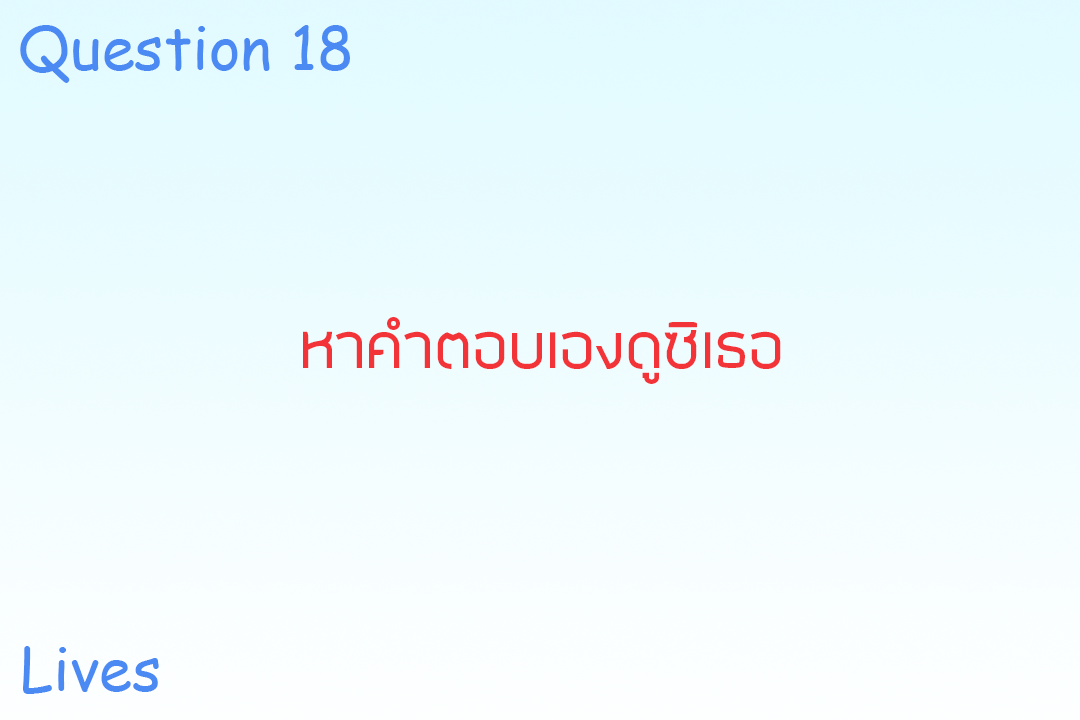
<style>
.page{position:relative;width:1080px;height:720px}
.page>*{position:absolute;margin:0}
.t1{font:60px "ComicSansMS";color:#4b8af2}
.t2{font:72px "SuperspaceRegular";color:#f23439}
.t3{font:59.6px "ComicSansMS";color:#4b8af2}
</style>
<div class="page">
<p class="t1" style="left:20px;top:25px;width:330px;height:58px">Question 18</p>
<p class="t2" style="left:303px;top:317px;width:478px;height:67px">หาคำตอบเองดูซิเธอ</p>
<p class="t3" style="left:23px;top:646px;width:136px;height:48px">Lives</p>
</div>
